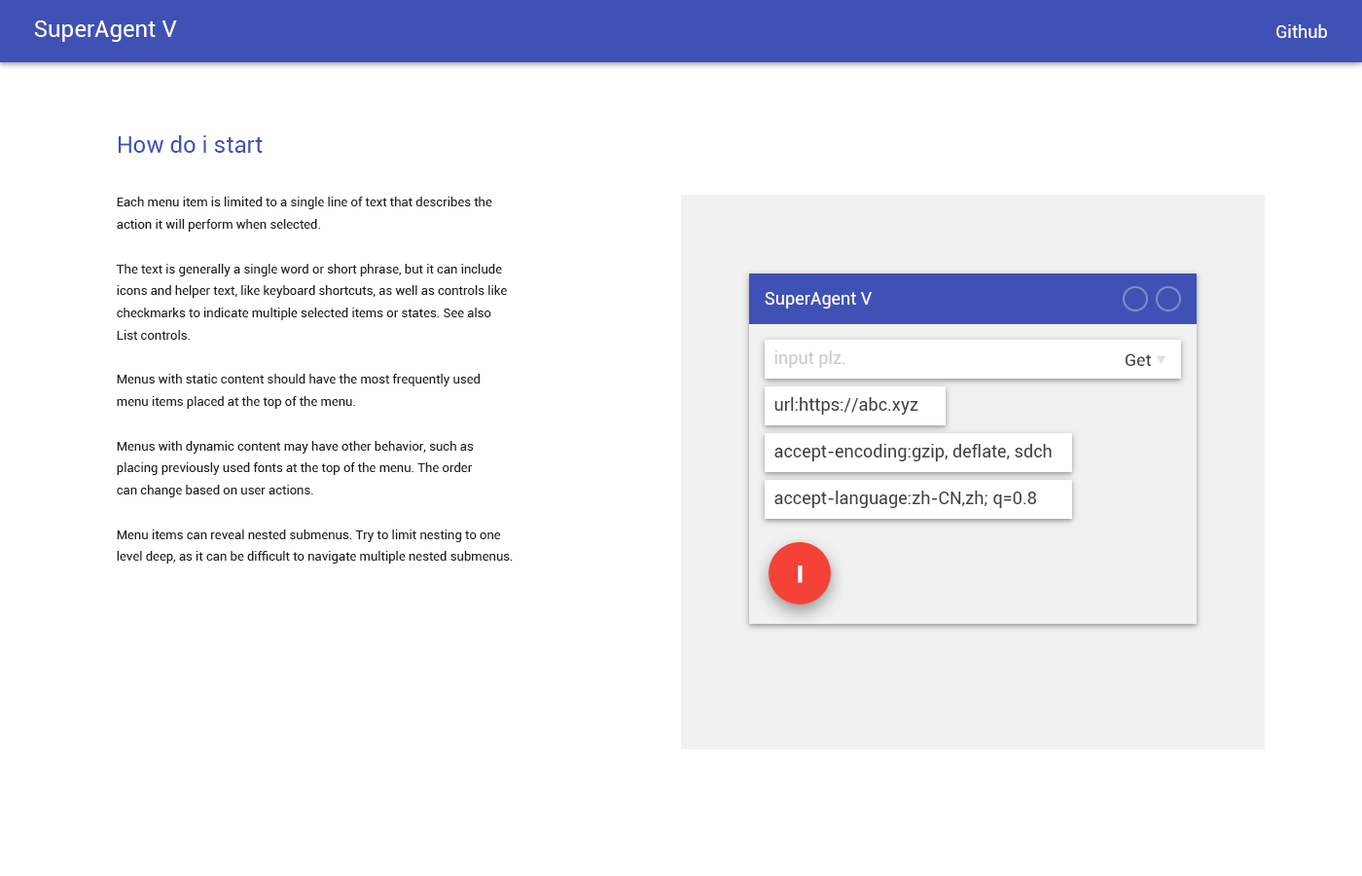
<style>
.page{position:relative;width:1362px;height:876px;background:#ffffff}
.page>*{position:absolute;margin:0}
.t1{font:23.3px "Roboto-Regular";color:#ffffff}
.t2{font:17.5px "Roboto-Regular";color:#ffffff}
.t3{font:12.6px "Roboto-Regular";color:#212121}
.t4{font:23.3px "Roboto-Regular";color:#3f51b5}
.t5{font:17.1px "Roboto-Regular";color:#cacaca}
.t6{font:16.9px "Roboto-Regular";color:#404040;scale:1.03 1}
.t7{font:17.1px "Roboto-Regular";color:#404040}
.t8{font:23.3px "Roboto-Bold";color:#ffffff;font-weight:bold}
</style>
<div class="page">
<p class="t1" style="left:34px;top:20px;width:143px;height:22px">SuperAgent V</p>
<p class="t2" style="left:1276px;top:24px;width:51px;height:14px">Github</p>
<p class="t3" style="left:116px;top:135px;width:397px;height:428px"><span class="t4">How do i start<br></span><br>Each menu item is limited to a single line of text that describes the <br>action it will perform when selected.<br><br>The text is generally a single word or short phrase, but it can include <br>icons and helper text, like keyboard shortcuts, as well as controls like <br>checkmarks to indicate multiple selected items or states. See also <br>List controls.<br><br>Menus with static content should have the most frequently used <br>menu items placed at the top of the menu.<br><br>Menus with dynamic content may have other behavior, such as <br>placing previously used fonts at the top of the menu. The order <br>can change based on user actions.<br><br>Menu items can reveal nested submenus. Try to limit nesting to one <br>level deep, as it can be difficult to navigate multiple nested submenus.</p>
<p class="t2" style="left:765px;top:292px;width:107px;height:16px">SuperAgent V</p>
<p class="t5" style="left:774px;top:350px;width:71px;height:18px">input plz.</p>
<p class="t6" style="left:1125px;top:353px;width:27px;height:13px">Get</p>
<p class="t7" style="left:774px;top:397px;width:144px;height:17px">url:https://abc.xyz</p>
<p class="t7" style="left:774px;top:444px;width:278px;height:17px">accept-encoding:gzip, deflate, sdch</p>
<p class="t7" style="left:774px;top:490px;width:263px;height:18px">accept-language:zh-CN,zh; q=0.8</p>
<p class="t8" style="left:798px;top:565px;width:5px;height:18px">I</p>
</div>
